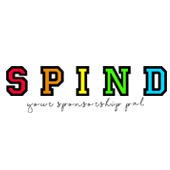
<style>
.page{position:relative;width:170px;height:170px;background:#ffffff}
.page>*{position:absolute;margin:0}
.t1{font:8.2px "ShorelinesScriptBold";letter-spacing:0.2em}
</style>
<div class="page">
<p class="t1" style="left:27px;top:97px;width:117px;height:16px;text-align:center">Your sponsorship pal</p>
</div>
